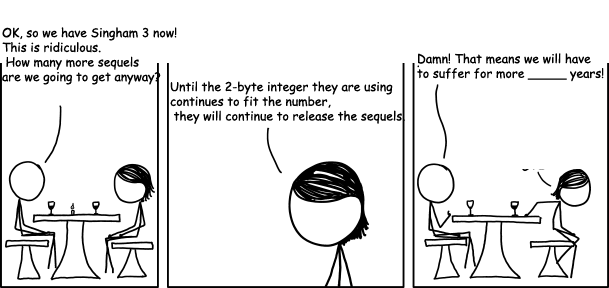
<style>
.page{position:relative;width:609px;height:288px;background:#ffffff}
.page>*{position:absolute;margin:0}
.t1{font:12.2px "ComicSansMS";color:#000000}
</style>
<div class="page">
<p class="t1" style="left:2px;top:27px;width:175px;height:58px">OK, so we have Singham 3 now! <br>This is ridiculous.<br> How many more sequels <br>are we going to get anyway?</p>
<p class="t1" style="left:417px;top:53px;width:187px;height:29px">Damn! That means we will have <br>to suffer for more _____ years!</p>
<p class="t1" style="left:170px;top:81px;width:235px;height:43px">Until the 2-byte integer they are using <br>continues to fit the number,<br> they will continue to release the sequels.</p>
</div>
